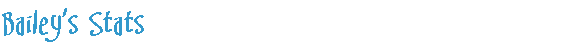
<style>
.page{position:relative;width:576px;height:48px;background:#ffffff}
.page>*{position:absolute;margin:0}
.t1{font:40px "SwingSetBB";color:#3399cc}
</style>
<div class="page">
<p class="t1" style="left:2px;top:8px;width:142px;height:34px">Bailey’s Stats</p>
</div>
